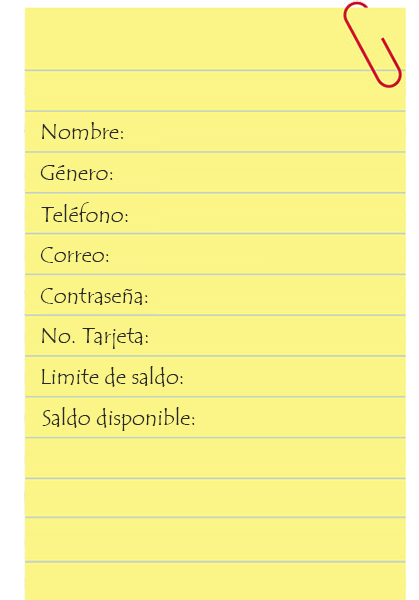
<style>
.page{position:relative;width:419px;height:600px;background:#fbf587}
.page>*{position:absolute;margin:0}
.t1{font:22px "TempusSansITC";color:#282828}
</style>
<div class="page">
<p class="t1" style="left:42px;top:122px;width:82px;height:18px">Nombre:</p>
<p class="t1" style="left:40px;top:165px;width:73px;height:16px">Género:</p>
<p class="t1" style="left:41px;top:202px;width:87px;height:21px">Teléfono:</p>
<p class="t1" style="left:40px;top:247px;width:69px;height:16px">Correo:</p>
<p class="t1" style="left:40px;top:288px;width:108px;height:17px">Contraseña:</p>
<p class="t1" style="left:42px;top:328px;width:106px;height:21px">No. Tarjeta:</p>
<p class="t1" style="left:42px;top:366px;width:141px;height:21px">Limite de saldo:</p>
<p class="t1" style="left:42px;top:407px;width:153px;height:24px">Saldo disponible:</p>
</div>
